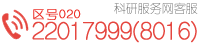
<style>
.page{position:relative;width:200px;height:46px;background:#ffffff}
.page>*{position:absolute;margin:0}
.t1{font:12px "HYe1gj";color:#747474}
.t2{font:12px "HYe1gj";letter-spacing:0.075em;color:#ec3028;font-weight:bold}
.t3{font:24.8px "HYe1gj";letter-spacing:-0.025em;color:#e5463f;font-weight:bold}
</style>
<div class="page">
<p class="t1" style="left:114px;top:2px;width:84px;height:13px">科研服务网客服</p>
<p class="t2" style="left:33px;top:9px;width:48px;height:11px">区号020</p>
<p class="t3" style="left:32px;top:20px;width:165px;height:23px">22017999(8016)</p>
</div>
